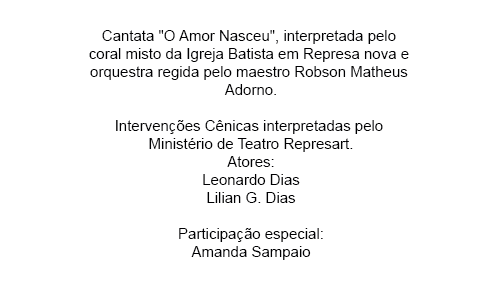
<style>
.page{position:relative;width:500px;height:300px;background:#ffffff}
.page>*{position:absolute;margin:0}
.t1{font:15px "ArialMT";color:#000002}
</style>
<div class="page">
<p class="t1" style="left:89px;top:30px;width:320px;height:230px;text-align:center">Cantata "O Amor Nasceu", interpretada pelo <br>coral misto da Igreja Batista em Represa nova e <br>orquestra regida pelo maestro Robson Matheus <br>Adorno.<br><br>Intervenções Cênicas interpretadas pelo <br>Ministério de Teatro Represart.<br>Atores:<br>Leonardo Dias<br>Lilian G. Dias<br><br>Participação especial:<br>Amanda Sampaio</p>
</div>
